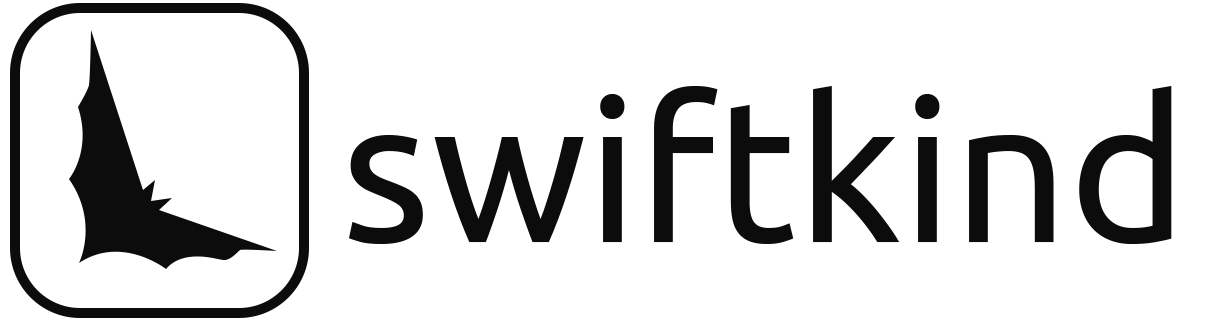
<style>
.page{position:relative;width:1209px;height:325px;background:#ffffff}
.page>*{position:absolute;margin:0}
.t1{font:201.4px "Ubuntu";color:#0c0c0c}
</style>
<div class="page">
<p class="t1" style="left:349px;top:86px;width:823px;height:158px">swiftkind</p>
</div>
